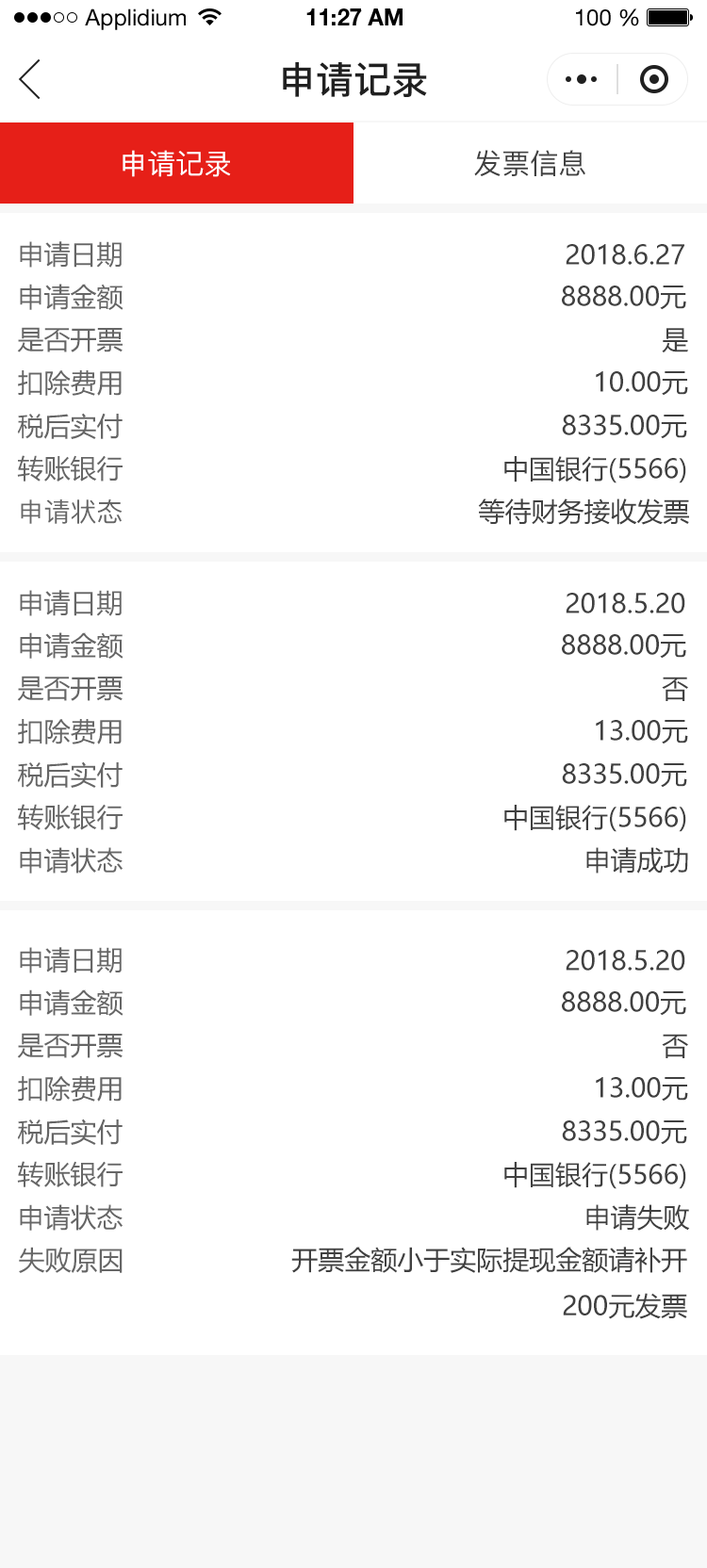
<style>
.page{position:relative;width:707px;height:1568px;background:#ffffff}
.page>*{position:absolute;margin:0}
.t1{font:22.6px "HelveticaNeueLTStd-Roman";color:#000000}
.t2{font:22.6px "HelveticaNeueLTStd-Bd";color:#000000}
.t3{font:37.7px "PingFang-SC-Bold";color:#202020;text-transform:uppercase}
.t4{font:28.3px "PingFang-SC-Medium";color:#ffffff;text-transform:uppercase}
.t5{font:28.3px "PingFang-SC-Medium";color:#404040;text-transform:uppercase}
.t6{font:26.4px "MicrosoftYaHei";color:#666666;text-transform:uppercase}
.t7{font:26.4px "MicrosoftYaHei";color:#404040;text-transform:uppercase}
.t8{font:26.4px "PingFang-SC-Medium";color:#666666;text-transform:uppercase}
</style>
<div class="page">
<p class="t1" style="left:85px;top:8px;width:101px;height:22px">Applidium</p>
<p class="t2" style="left:306px;top:8px;width:96px;height:17px">11:27 AM</p>
<p class="t1" style="left:576px;top:8px;width:63px;height:18px">100 %</p>
<p class="t3" style="left:283px;top:62px;width:144px;height:35px">申请记录</p>
<p class="t4" style="left:122px;top:150px;width:109px;height:27px">申请记录</p>
<p class="t5" style="left:474px;top:150px;width:111px;height:26px">发票信息</p>
<p class="t6" style="left:20px;top:241px;width:102px;height:27px">申请日期</p>
<p class="t7" style="left:565px;top:244px;width:119px;height:21px">2018.6.27</p>
<p class="t6" style="left:20px;top:284px;width:103px;height:26px">申请金额</p>
<p class="t7" style="left:562px;top:286px;width:124px;height:24px">8888.00元</p>
<p class="t6" style="left:17px;top:327px;width:105px;height:25px">是否开票</p>
<p class="t7" style="left:662px;top:328px;width:26px;height:25px">是</p>
<p class="t6" style="left:18px;top:370px;width:104px;height:26px">扣除费用</p>
<p class="t7" style="left:596px;top:371px;width:92px;height:25px">10.00元</p>
<p class="t6" style="left:17px;top:413px;width:105px;height:26px">税后实付</p>
<p class="t7" style="left:562px;top:415px;width:125px;height:24px">8335.00元</p>
<p class="t6" style="left:17px;top:455px;width:105px;height:27px">转账银行</p>
<p class="t7" style="left:504px;top:456px;width:182px;height:27px">中国银行(5566)</p>
<p class="t8" style="left:21px;top:499px;width:101px;height:25px">申请状态</p>
<p class="t7" style="left:478px;top:498px;width:211px;height:27px">等待财务接收发票</p>
<p class="t6" style="left:20px;top:590px;width:102px;height:26px">申请日期</p>
<p class="t7" style="left:565px;top:593px;width:120px;height:20px">2018.5.20</p>
<p class="t6" style="left:20px;top:632px;width:103px;height:27px">申请金额</p>
<p class="t7" style="left:562px;top:634px;width:124px;height:25px">8888.00元</p>
<p class="t6" style="left:17px;top:676px;width:105px;height:25px">是否开票</p>
<p class="t7" style="left:662px;top:677px;width:26px;height:24px">否</p>
<p class="t6" style="left:18px;top:719px;width:104px;height:25px">扣除费用</p>
<p class="t7" style="left:596px;top:720px;width:92px;height:24px">13.00元</p>
<p class="t6" style="left:17px;top:761px;width:105px;height:27px">税后实付</p>
<p class="t7" style="left:562px;top:763px;width:125px;height:25px">8335.00元</p>
<p class="t6" style="left:17px;top:804px;width:105px;height:26px">转账银行</p>
<p class="t7" style="left:504px;top:805px;width:182px;height:27px">中国银行(5566)</p>
<p class="t6" style="left:20px;top:847px;width:102px;height:27px">申请状态</p>
<p class="t7" style="left:586px;top:847px;width:102px;height:27px">申请成功</p>
<p class="t6" style="left:20px;top:947px;width:102px;height:26px">申请日期</p>
<p class="t7" style="left:565px;top:950px;width:120px;height:21px">2018.5.20</p>
<p class="t6" style="left:20px;top:989px;width:103px;height:27px">申请金额</p>
<p class="t7" style="left:562px;top:991px;width:124px;height:25px">8888.00元</p>
<p class="t6" style="left:17px;top:1033px;width:105px;height:25px">是否开票</p>
<p class="t7" style="left:662px;top:1034px;width:26px;height:24px">否</p>
<p class="t6" style="left:18px;top:1076px;width:104px;height:26px">扣除费用</p>
<p class="t7" style="left:596px;top:1077px;width:92px;height:25px">13.00元</p>
<p class="t6" style="left:17px;top:1119px;width:105px;height:26px">税后实付</p>
<p class="t7" style="left:562px;top:1120px;width:125px;height:25px">8335.00元</p>
<p class="t6" style="left:17px;top:1161px;width:105px;height:26px">转账银行</p>
<p class="t7" style="left:504px;top:1162px;width:182px;height:27px">中国银行(5566)</p>
<p class="t6" style="left:20px;top:1204px;width:102px;height:27px">申请状态</p>
<p class="t7" style="left:586px;top:1204px;width:104px;height:27px">申请失败</p>
<p class="t6" style="left:19px;top:1247px;width:103px;height:26px">失败原因</p>
<p class="t7" style="left:291px;top:1247px;width:396px;height:72px;text-align:right">开票金额小于实际提现金额请补开<br>200元发票</p>
</div>
